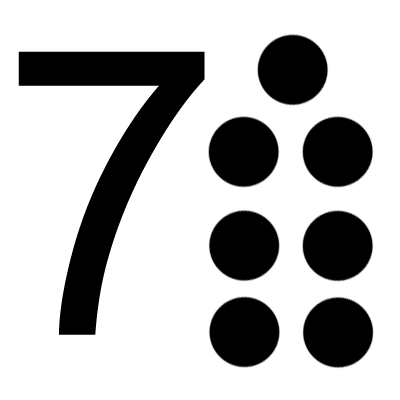
<style>
.page{position:relative;width:400px;height:400px;background:#ffffff}
.page>*{position:absolute;margin:0}
.t1{font:400.2px "ArialMT";color:#000000}
</style>
<div class="page">
<p class="t1" style="left:18px;top:51px;width:187px;height:284px">7</p>
</div>
